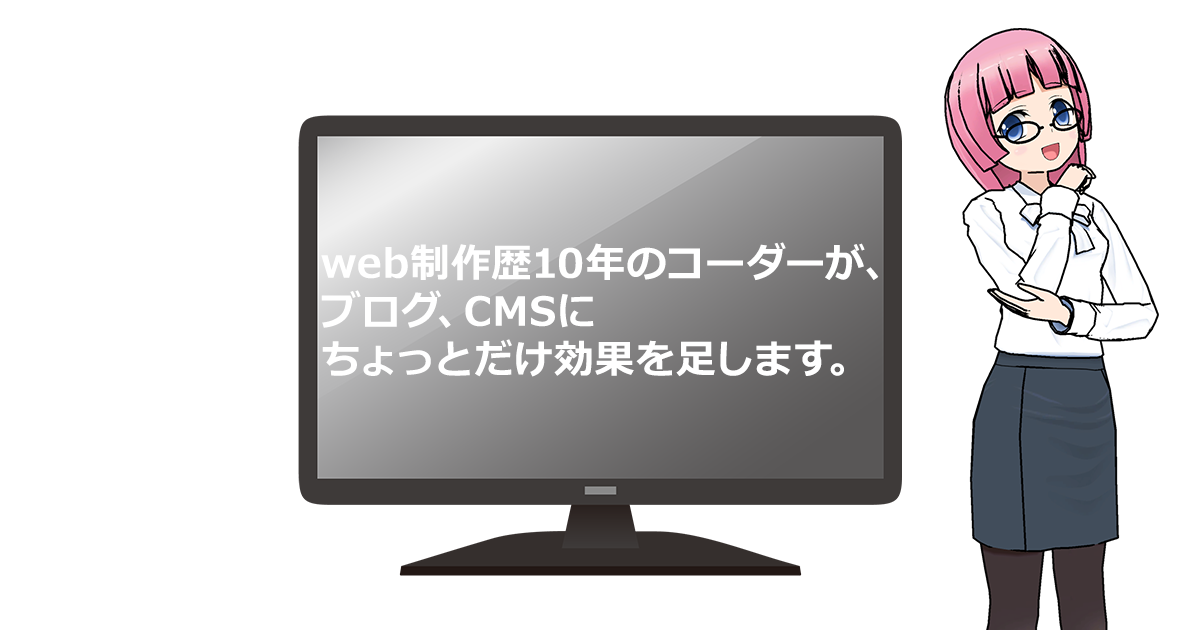
<style>
.page{position:relative;width:1200px;height:630px;background:#ffffff}
.page>*{position:absolute;margin:0}
.t1{font:40px/48px "Meiryo-Bold";letter-spacing:0.025em;color:#ffffff}
</style>
<div class="page">
<p class="t1" style="left:321px;top:242px;width:558px;height:135px">web制作歴10年のコーダーが、<br>ブログ、CMSに<br>ちょっとだけ効果を足します。</p>
</div>
